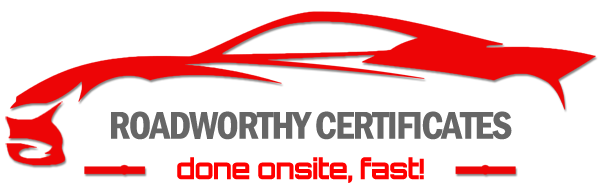
<style>
.page{position:relative;width:600px;height:194px;background:#ffffff}
.page>*{position:absolute;margin:0}
.t1{font:40px "FranklinGothic-DemiCond";letter-spacing:-0.04em;color:#666666}
.t2{font:28.2px "Orbitron-Bold";letter-spacing:-0.04em;color:#ff0000}
</style>
<div class="page">
<p class="t1" style="left:111px;top:111px;width:401px;height:29px">ROADWORTHY CERTIFICATES</p>
<p class="t2" style="left:177px;top:157px;width:247px;height:26px">done onsite, fast!</p>
</div>
